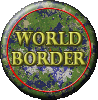
<style>
.page{position:relative;width:98px;height:100px;background:#ffffff}
.page>*{position:absolute;margin:0}
.t1{font:18px/20px "PerpetuaTitlingMT-Bold";letter-spacing:-0.02em;font-weight:bold;scale:0.9 1}
</style>
<div class="page">
<p class="t1" style="left:11px;top:32px;width:75px;height:34px;text-align:center">World<br>Border</p>
</div>
